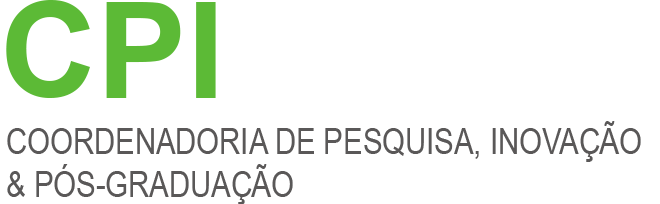
<style>
.page{position:relative;width:660px;height:204px;background:#ffffff}
.page>*{position:absolute;margin:0}
.t1{font:134.4px "Arial-BoldMT";color:#5cba36}
.t2{font:35.7px "ArialNarrow";color:#5a5858}
</style>
<div class="page">
<p class="t1" style="left:6px;top:0px;width:210px;height:98px">CPI</p>
<p class="t2" style="left:7px;top:121px;width:634px;height:84px">COORDENADORIA DE PESQUISA, INOVAÇÃO<br>&amp; PÓS-GRADUAÇÃO</p>
</div>
